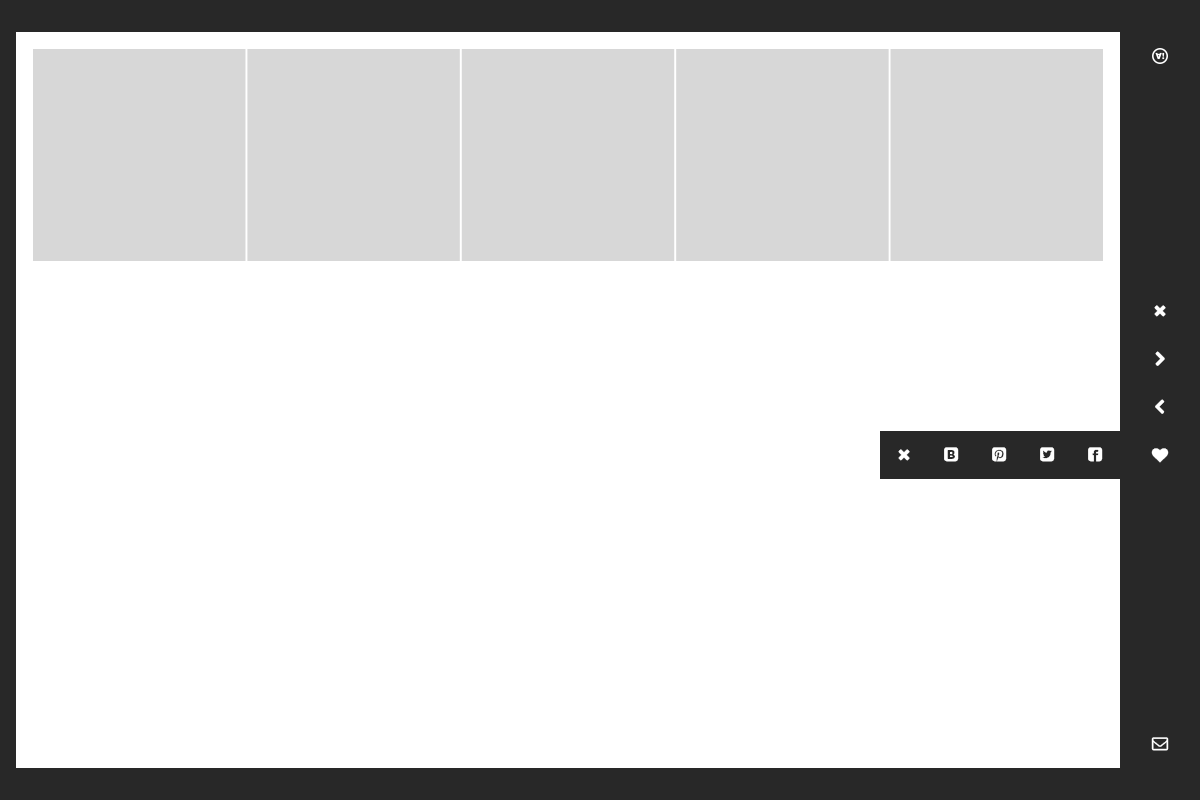
<style>
.page{position:relative;width:1200px;height:800px;background:#ffffff}
.page>*{position:absolute;margin:0}
.t1{font:12px "HelveticaNeueCyr-Heavy";color:#282828}
</style>
<div class="page">
<p class="t1" style="left:947px;top:450px;width:8px;height:9px">В</p>
</div>
